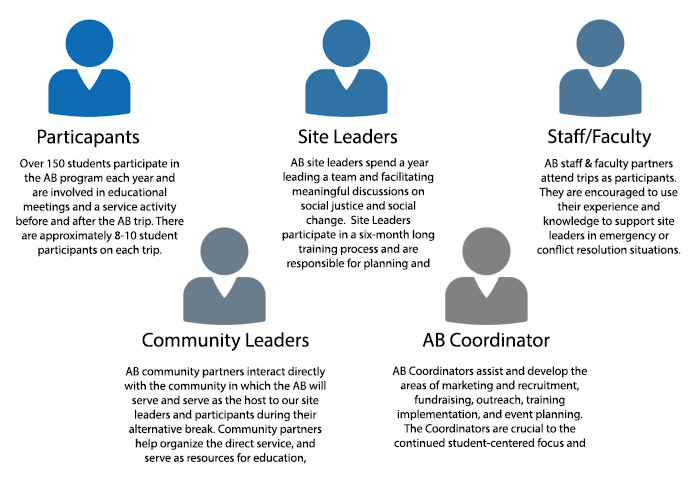
<style>
.page{position:relative;width:693px;height:479px;background:#ffffff}
.page>*{position:absolute;margin:0}
.t1{font:20px "MyriadPro-Regular";color:#000000}
.t2{font:12px "MyriadPro-Regular";color:#000000}
</style>
<div class="page">
<p class="t1" style="left:38px;top:129px;width:101px;height:19px">Particapants</p>
<p class="t1" style="left:298px;top:128px;width:99px;height:16px">Site Leaders</p>
<p class="t1" style="left:548px;top:128px;width:104px;height:20px">Staff/Faculty</p>
<p class="t2" style="left:16px;top:158px;width:168px;height:99px;text-align:center">Over 150 students participate in the AB program each year and are involved in educational meetings and a service activity before and after the AB trip. There are approximately 8-10 student participants on each trip.</p>
<p class="t2" style="left:282px;top:157px;width:153px;height:113px;text-align:center">AB site leaders spend a year leading a team and facilitating meaningful discussions on social justice and social change.  Site Leaders participate in a six-month long training process and are responsible for planning and facilitating learning before, during and after trips.</p>
<p class="t2" style="left:537px;top:158px;width:144px;height:96px;text-align:center">AB staff &amp; faculty partners attend trips as participants. They are encouraged to use their experience and knowledge to support site leaders in emergency or conflict resolution situations.</p>
<p class="t1" style="left:142px;top:332px;width:167px;height:19px">Community Leaders</p>
<p class="t1" style="left:422px;top:332px;width:128px;height:15px">AB Coordinator</p>
<p class="t2" style="left:124px;top:366px;width:202px;height:98px;text-align:center">AB community partners interact directly with the community in which the AB will serve and serve as the host to our site leaders and participants during their alternative break. Community partners help organize the direct service, and serve as resources for education, orientation, and training.</p>
<p class="t2" style="left:392px;top:366px;width:195px;height:81px;text-align:center">AB Coordinators assist and develop the areas of marketing and recruitment, fundraising, outreach, training implementation, and event planning.  The Coordinators are crucial to the continued student-centered focus and growth of the program.</p>
</div>
